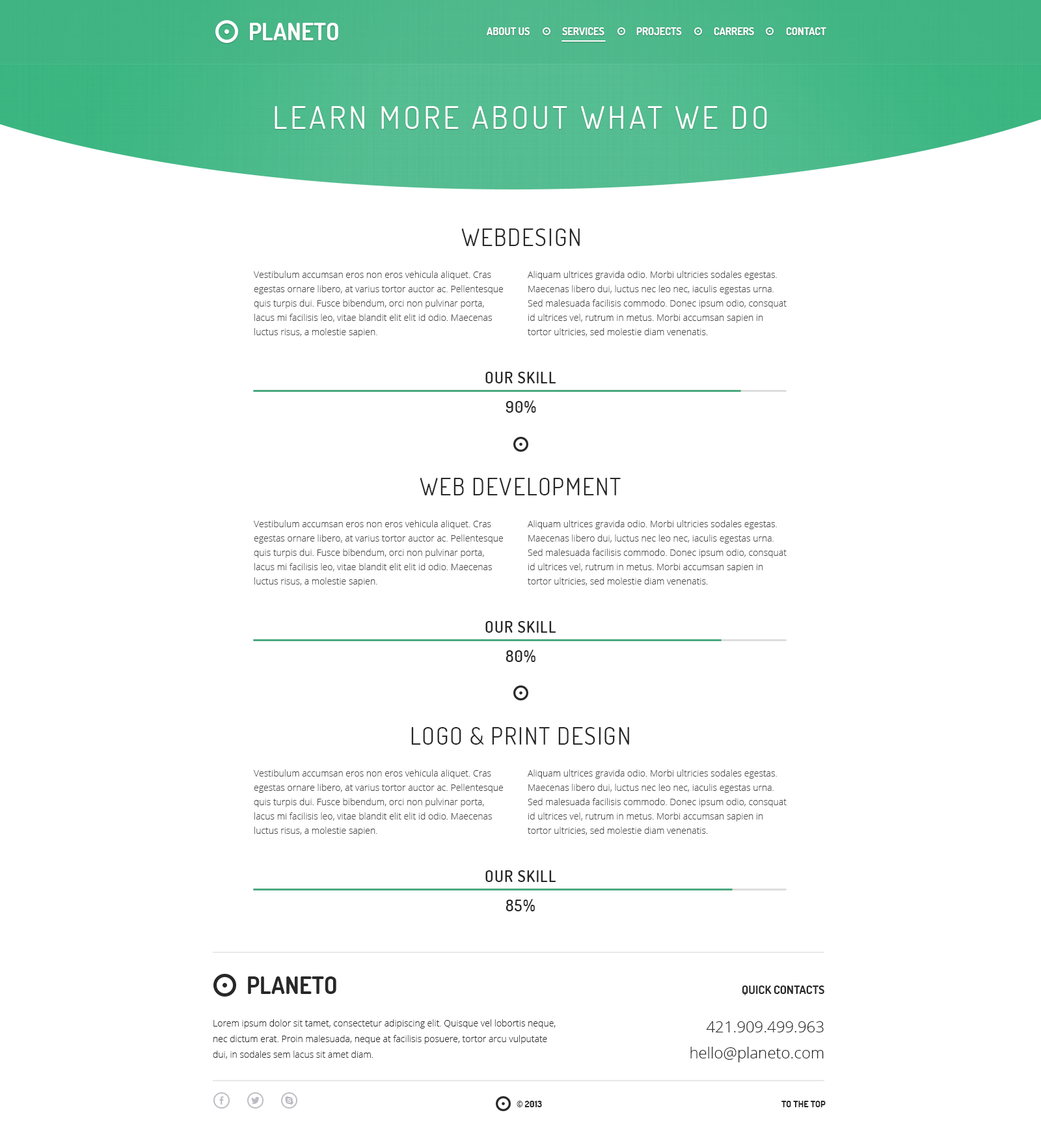
<style>
.page{position:relative;width:1041px;height:1145px;background:#ffffff}
.page>*{position:absolute;margin:0}
.t1{font:23.4px "Dosis-Bold";color:#ffffff;text-transform:uppercase}
.t2{font:10.4px "Dosis-Bold";color:#ffffff;text-transform:uppercase}
.t3{font:31.2px "Dosis-Regular";letter-spacing:0.1em;color:#ffffff;text-transform:uppercase}
.t4{font:23.4px "Dosis-Regular";letter-spacing:0.05em;color:#282828;text-transform:uppercase}
.t5{font:9.1px/14.3px "OpenSans-Light";color:#474747}
.t6{font:15.6px "Dosis-SemiBold";letter-spacing:0.05em;color:#282828;text-transform:uppercase}
.t7{font:23.4px "Dosis-Bold";color:#282828;text-transform:uppercase}
.t8{font:11.7px "Dosis-Bold";color:#282828;text-transform:uppercase}
.t9{font:9.1px/15.6px "OpenSans-Light";color:#282828}
.t10{font:15.6px/26px "OpenSans-Light";color:#282828}
.t11{font:9.2px "Dosis-Bold";color:#282828;text-transform:uppercase}
</style>
<div class="page">
<p class="t1" style="left:250px;top:23px;width:88px;height:17px">Planeto</p>
<p class="t2" style="left:487px;top:27px;width:43px;height:8px">About us</p>
<p class="t2" style="left:562px;top:27px;width:43px;height:8px">Services</p>
<p class="t2" style="left:637px;top:27px;width:45px;height:8px">projects</p>
<p class="t2" style="left:714px;top:27px;width:40px;height:8px">carrers</p>
<p class="t2" style="left:786px;top:27px;width:41px;height:8px">Contact</p>
<p class="t3" style="left:275px;top:106px;width:492px;height:23px">learn more about what we do</p>
<p class="t4" style="left:461px;top:228px;width:119px;height:18px">webdesign</p>
<p class="t5" style="left:254px;top:271px;width:249px;height:66px">Vestibulum accumsan eros non eros vehicula aliquet. Cras egestas ornare libero, at varius tortor auctor ac. Pellentesque quis turpis dui. Fusce bibendum, orci non pulvinar porta, lacus mi facilisis leo, vitae blandit elit elit id odio. Maecenas luctus risus, a molestie sapien.</p>
<p class="t5" style="left:528px;top:271px;width:259px;height:66px">Aliquam ultrices gravida odio. Morbi ultricies sodales egestas. Maecenas libero dui, luctus nec leo nec, iaculis egestas urna. Sed malesuada facilisis commodo. Donec ipsum odio, consquat id ultrices vel, rutrum in metus. Morbi accumsan sapien in tortor ultricies, sed molestie diam venenatis.</p>
<p class="t6" style="left:486px;top:372px;width:71px;height:11px">Our skill</p>
<p class="t6" style="left:506px;top:400px;width:30px;height:13px">90%</p>
<p class="t4" style="left:420px;top:478px;width:201px;height:17px">web development</p>
<p class="t5" style="left:254px;top:520px;width:249px;height:66px">Vestibulum accumsan eros non eros vehicula aliquet. Cras egestas ornare libero, at varius tortor auctor ac. Pellentesque quis turpis dui. Fusce bibendum, orci non pulvinar porta, lacus mi facilisis leo, vitae blandit elit elit id odio. Maecenas luctus risus, a molestie sapien.</p>
<p class="t5" style="left:528px;top:520px;width:259px;height:66px">Aliquam ultrices gravida odio. Morbi ultricies sodales egestas. Maecenas libero dui, luctus nec leo nec, iaculis egestas urna. Sed malesuada facilisis commodo. Donec ipsum odio, consquat id ultrices vel, rutrum in metus. Morbi accumsan sapien in tortor ultricies, sed molestie diam venenatis.</p>
<p class="t6" style="left:486px;top:621px;width:71px;height:12px">Our skill</p>
<p class="t6" style="left:506px;top:650px;width:30px;height:13px">80%</p>
<p class="t4" style="left:411px;top:727px;width:218px;height:18px">logo &amp; print design</p>
<p class="t5" style="left:254px;top:769px;width:249px;height:67px">Vestibulum accumsan eros non eros vehicula aliquet. Cras egestas ornare libero, at varius tortor auctor ac. Pellentesque quis turpis dui. Fusce bibendum, orci non pulvinar porta, lacus mi facilisis leo, vitae blandit elit elit id odio. Maecenas luctus risus, a molestie sapien.</p>
<p class="t5" style="left:528px;top:769px;width:259px;height:66px">Aliquam ultrices gravida odio. Morbi ultricies sodales egestas. Maecenas libero dui, luctus nec leo nec, iaculis egestas urna. Sed malesuada facilisis commodo. Donec ipsum odio, consquat id ultrices vel, rutrum in metus. Morbi accumsan sapien in tortor ultricies, sed molestie diam venenatis.</p>
<p class="t6" style="left:486px;top:870px;width:71px;height:12px">Our skill</p>
<p class="t6" style="left:506px;top:899px;width:29px;height:13px">85%</p>
<p class="t7" style="left:248px;top:976px;width:89px;height:18px">Planeto</p>
<p class="t8" style="left:743px;top:985px;width:82px;height:10px">quick contacts</p>
<p class="t9" style="left:213px;top:1019px;width:343px;height:40px">Lorem ipsum dolor sit tamet, consectetur adipiscing elit. Quisque vel lobortis neque, nec dictum erat. Proin malesuada, neque at facilisis posuere, tortor arcu vulputate dui, in sodales sem lacus sit amet diam.</p>
<p class="t10" style="left:691px;top:1021px;width:133px;height:41px;text-align:right">421.909.499.963<br>hello@planeto.com</p>
<p class="t11" style="left:517px;top:1101px;width:25px;height:6px">© 2013</p>
<p class="t11" style="left:782px;top:1101px;width:44px;height:6px">To the top</p>
</div>
